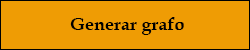
<style>
.page{position:relative;width:250px;height:50px;background:#ef9c04}
.page>*{position:absolute;margin:0}
.t1{font:18px "BookAntiqua-Bold";color:#000000}
</style>
<div class="page">
<p class="t1" style="left:70px;top:17px;width:114px;height:18px">Generar grafo</p>
</div>
